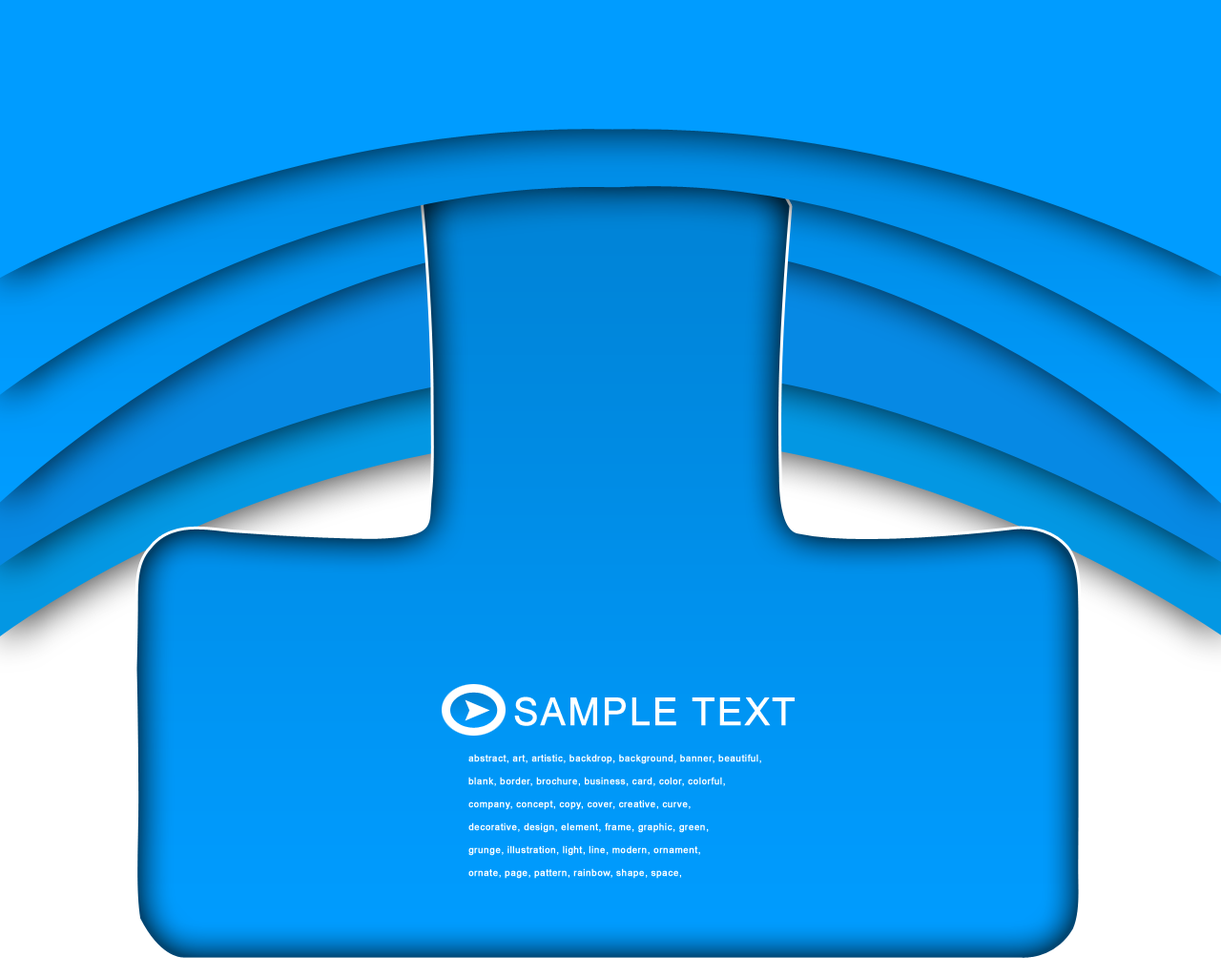
<style>
.page{position:relative;width:1221px;height:977px}
.page>*{position:absolute;margin:0}
.t1{font:38.2px "ArialMT";letter-spacing:0.025em;color:#ffffff;font-weight:bold}
.t2{font:9.5px/22.9px "ArialMT";letter-spacing:0.025em;color:#ffffff;font-weight:bold}
</style>
<div class="page">
<p class="t1" style="left:514px;top:696px;width:281px;height:30px">SAMPLE TEXT</p>
<p class="t2" style="left:468px;top:754px;width:293px;height:124px">abstract, art, artistic, backdrop, background, banner, beautiful, <br>blank, border, brochure, business, card, color, colorful, <br>company, concept, copy, cover, creative, curve, <br>decorative, design, element, frame, graphic, green, <br>grunge, illustration, light, line, modern, ornament, <br>ornate, page, pattern, rainbow, shape, space,</p>
</div>
